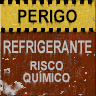
<style>
.page{position:relative;width:96px;height:96px}
.page>*{position:absolute;margin:0}
.t1{font:17.3px "Arial-BoldMT";color:#000000;scale:0.9 1}
.t2{font:17.3px "Arial-BoldMT";color:#bdbdbd;scale:0.65 1}
.t3{font:12px/12px "Arial-BoldMT";color:#bdbdbd;scale:0.9 1}
</style>
<div class="page">
<p class="t1" style="left:18px;top:9px;width:59px;height:14px">PERIGO</p>
<p class="t2" style="left:3px;top:40px;width:89px;height:14px">REFRIGERANTE</p>
<p class="t3" style="left:23px;top:61px;width:47px;height:22px;text-align:center">RISCO<br>QUÍMICO</p>
</div>
